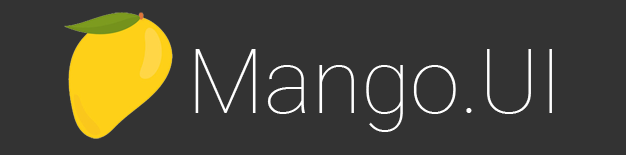
<style>
.page{position:relative;width:626px;height:155px;background:#333333}
.page>*{position:absolute;margin:0}
.t1{font:90px "Roboto-Thin";color:#ffffff}
</style>
<div class="page">
<p class="t1" style="left:195px;top:49px;width:357px;height:83px">Mango.UI</p>
</div>
